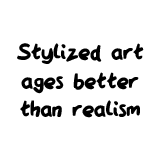
<style>
.page{position:relative;width:160px;height:160px;background:#ffffff}
.page>*{position:absolute;margin:0}
.t1{font:23.9px "QAReports";color:#000000}
</style>
<div class="page">
<p class="t1" style="left:17px;top:43px;width:127px;height:75px;text-align:center">Stylized art<br>ages better<br>than realism</p>
</div>
